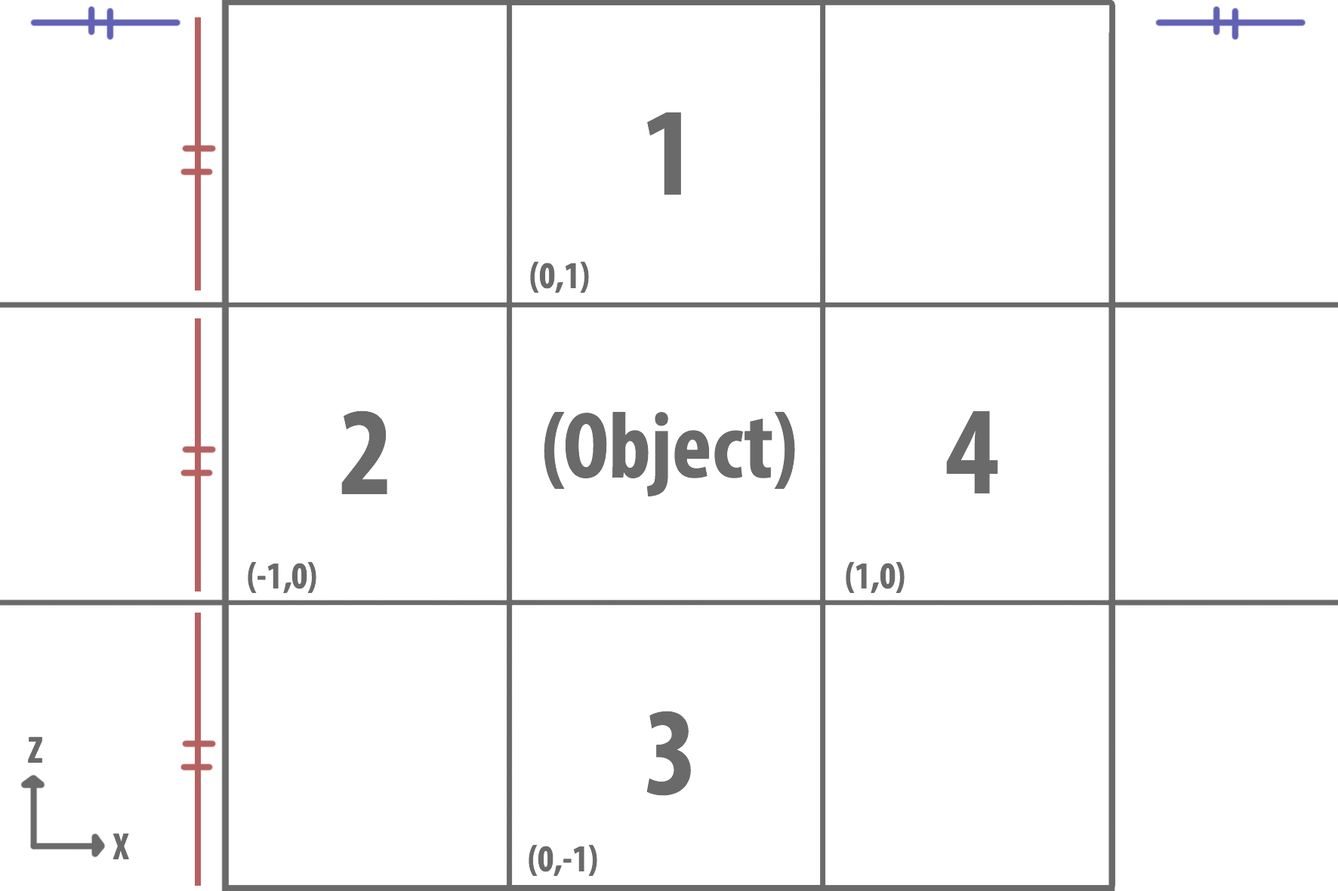
<style>
.page{position:relative;width:1338px;height:891px;background:#ffffff}
.page>*{position:absolute;margin:0}
.t1{font:125.8px "MyriadPro-BoldCond";color:#6a6a6a}
.t2{font:9.1px "MyriadPro-BoldCond";color:#6a6a6a}
.t3{font:94.4px "MyriadPro-BoldCond";color:#6a6a6a}
.t4{font:37.7px "MyriadPro-BoldCond";color:#6a6a6a}
</style>
<div class="page">
<p class="t1" style="left:647px;top:112px;width:34px;height:83px">1</p>
<p class="t2" style="left:530px;top:261px;width:59px;height:33px">(0,1)</p>
<p class="t1" style="left:341px;top:411px;width:46px;height:83px">2</p>
<p class="t3" style="left:543px;top:411px;width:252px;height:86px">(Object)</p>
<p class="t1" style="left:946px;top:411px;width:52px;height:83px">4</p>
<p class="t2" style="left:248px;top:562px;width:68px;height:32px">(-1,0)</p>
<p class="t2" style="left:845px;top:562px;width:59px;height:32px">(1,0)</p>
<p class="t1" style="left:646px;top:711px;width:45px;height:85px">3</p>
<p class="t4" style="left:28px;top:737px;width:14px;height:26px">Z</p>
<p class="t2" style="left:112px;top:833px;width:17px;height:27px">X</p>
<p class="t2" style="left:528px;top:845px;width:69px;height:32px">(0,-1)</p>
</div>
